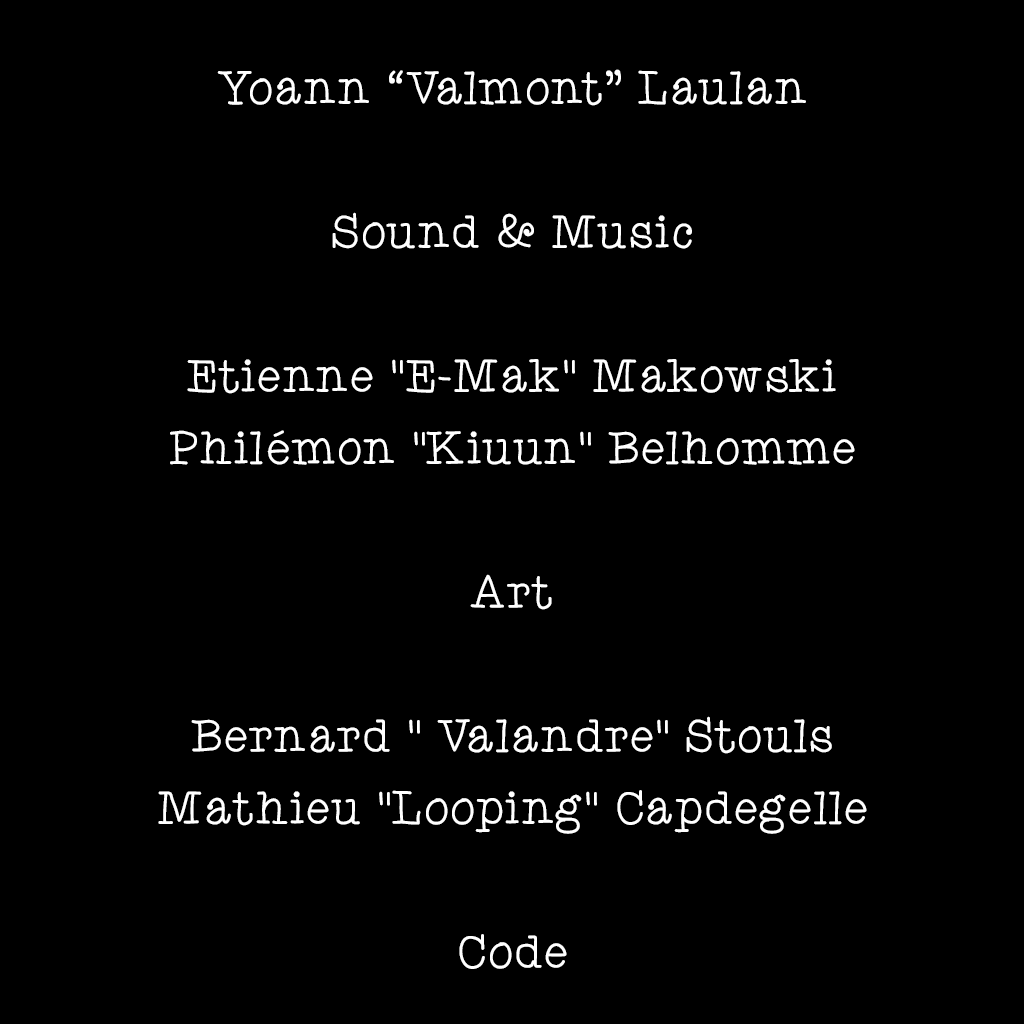
<style>
.page{position:relative;width:1024px;height:1024px;background:#000000}
.page>*{position:absolute;margin:0}
.t1{font:48px/72px "AniTypewriter";color:#ffffff}
</style>
<div class="page">
<p class="t1" style="left:158px;top:69px;width:709px;height:900px;text-align:center">Yoann “Valmont” Laulan<br><br>Sound &amp; Music<br><br>Etienne "E-Mak" Makowski<br>Philémon "Kiuun" Belhomme<br><br>Art<br><br>Bernard " Valandre" Stouls<br>Mathieu "Looping" Capdegelle<br><br>Code</p>
</div>
